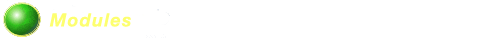
<style>
.page{position:relative;width:486px;height:38px;background:#ffffff}
.page>*{position:absolute;margin:0}
.t1{font:18px "HelveticaNeue-BoldItalic";letter-spacing:0.075em;color:#fdff6f}
</style>
<div class="page">
<p class="t1" style="left:49px;top:13px;width:82px;height:14px">Modules</p>
</div>
